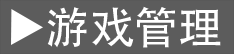
<style>
.page{position:relative;width:234px;height:54px;background:#5c5c5c}
.page>*{position:absolute;margin:0}
.t1{font:44.2px "AdobeHeitiStd-Regular";color:#ffffff}
</style>
<div class="page">
<p class="t1" style="left:47px;top:6px;width:174px;height:42px">游戏管理</p>
</div>
